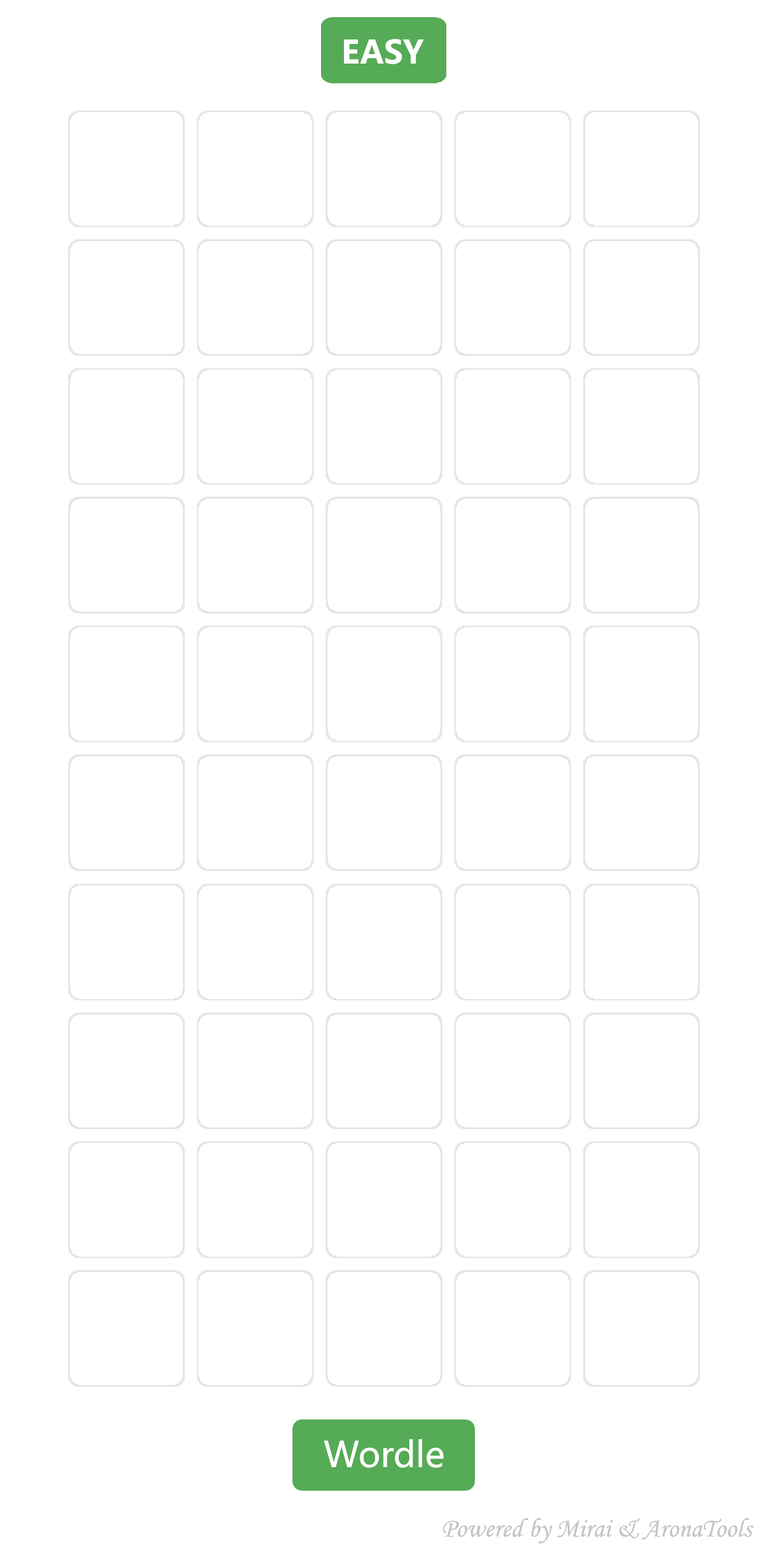
<style>
.page{position:relative;width:768px;height:1553px;background:#ffffff}
.page>*{position:absolute;margin:0}
.t1{font:31.8px "MicrosoftYaHeiUI-Bold";color:#ffffff}
.t2{font:35px "MicrosoftYaHeiUI";color:#ffffff}
.t3{font:26.7px "MonotypeCorsiva";color:#afafaf}
.t4{font:26.7px "MonotypeCorsiva";color:#c5c5c5}
</style>
<div class="page">
<p class="t1" style="left:344px;top:39px;width:80px;height:25px">EASY</p>
<p class="t2" style="left:324px;top:1439px;width:120px;height:28px">Wordle</p>
<p class="t3" style="left:443px;top:1518px;width:310px;height:25px">Powered by <span class="t4">Mirai &amp; </span>AronaTools</p>
</div>
